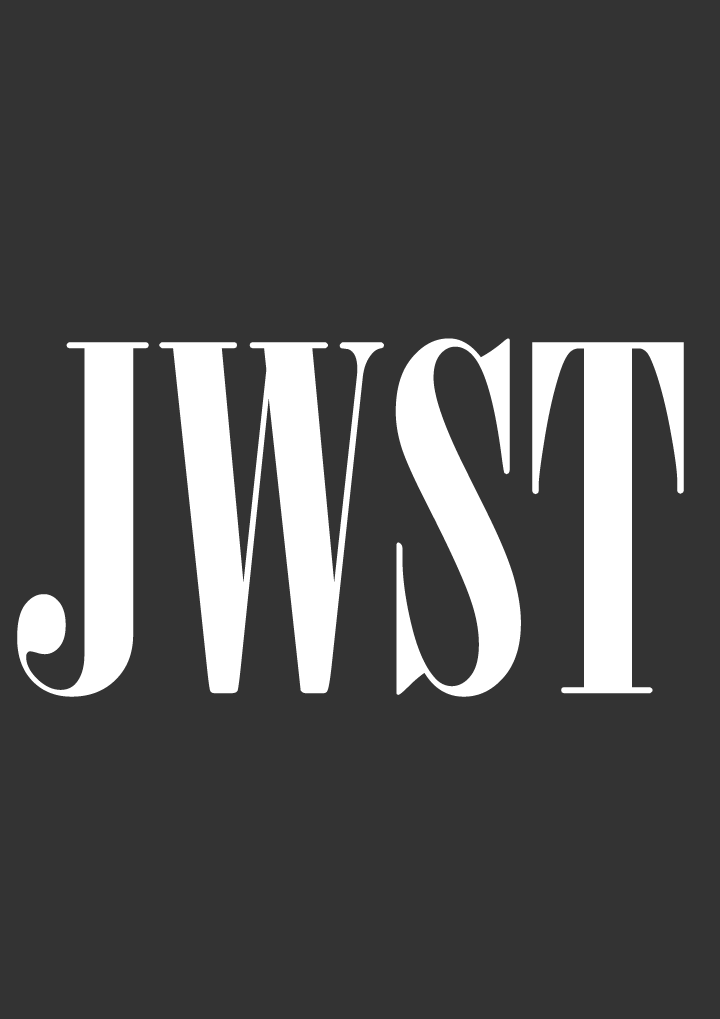
<style>
.page{position:relative;width:720px;height:1019px;background:#333333}
.page>*{position:absolute;margin:0}
.t1{font:477.6px "Onyx";color:#ffffff}
</style>
<div class="page">
<p class="t1" style="left:17px;top:338px;width:667px;height:359px">JWST</p>
</div>
